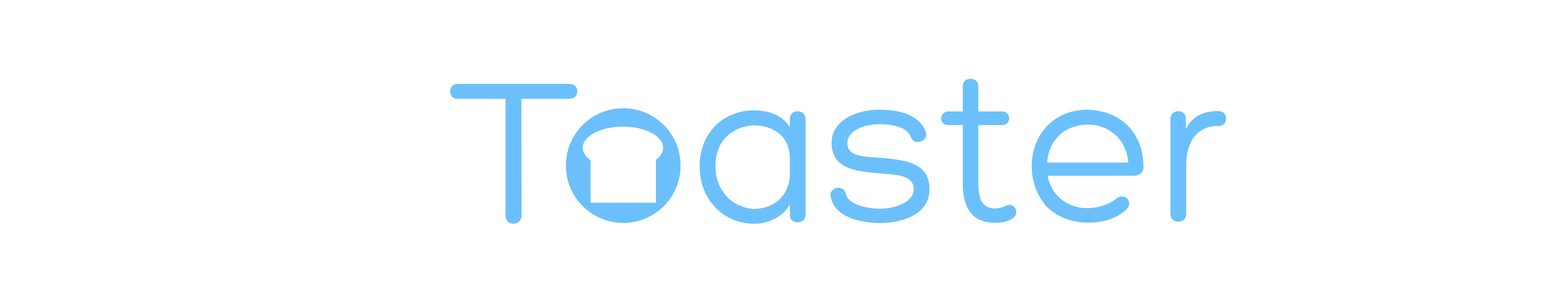
<style>
.page{position:relative;width:1568px;height:297px;background:#ffffff}
.page>*{position:absolute;margin:0}
.t1{font:215.6px "Hero";color:#6bc0fc}
</style>
<div class="page">
<p class="t1" style="left:450px;top:79px;width:776px;height:145px">T  aster</p>
</div>
